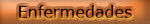
<style>
.page{position:relative;width:150px;height:24px}
.page>*{position:absolute;margin:0}
.t1{font:16px "Verdana"}
</style>
<div class="page">
<p class="t1" style="left:19px;top:5px;width:113px;height:13px">Enfermedades</p>
</div>
